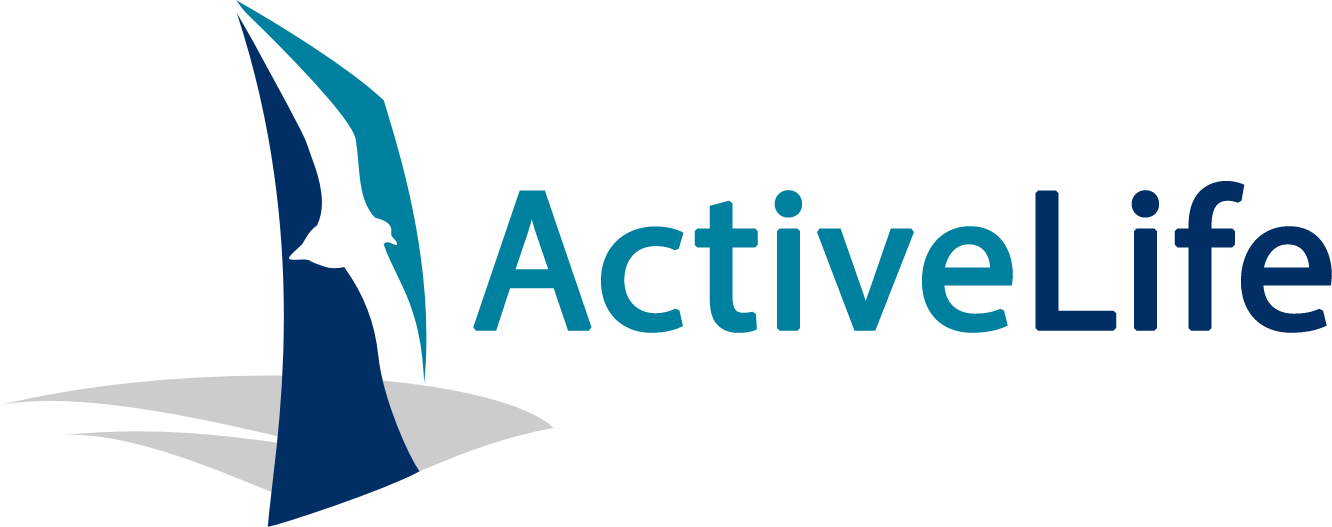
<style>
.page{position:relative;width:1332px;height:527px;background:#ffffff}
.page>*{position:absolute;margin:0}
.t1{font:200px "MyriadPro-Regular";color:#00809f;font-weight:bold}
.t2{font:200px "MyriadPro-Regular";color:#002e65;font-weight:bold}
</style>
<div class="page">
<p class="t1" style="left:473px;top:181px;width:859px;height:152px">Active<span class="t2">Life</span></p>
</div>
